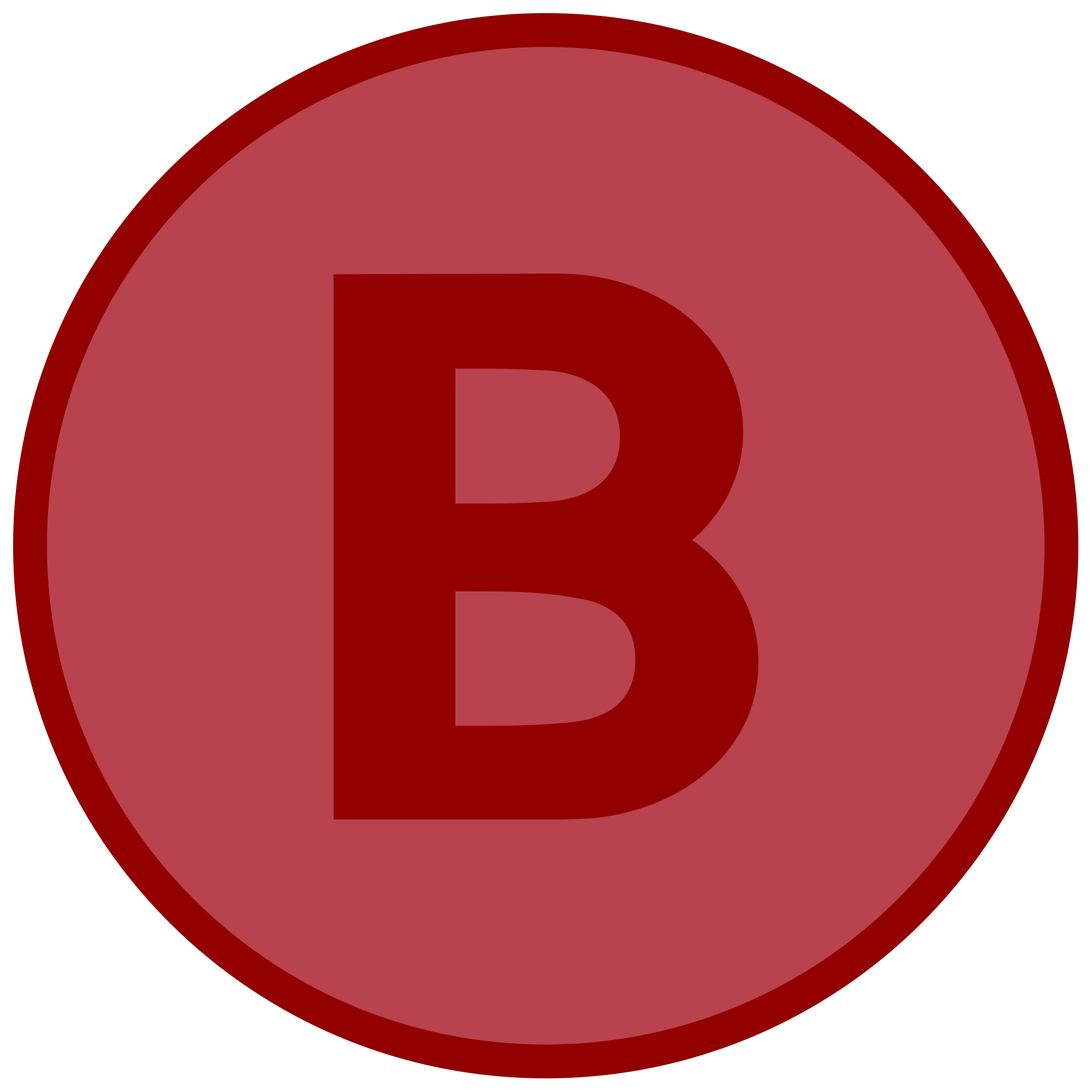
<style>
.page{position:relative;width:1092px;height:1092px;background:#b8424d}
.page>*{position:absolute;margin:0}
.t1{font:665px "RabbidHighwaySignII";color:#930000;scale:1.06 1}
</style>
<div class="page">
<p class="t1" style="left:334px;top:274px;width:424px;height:546px">B</p>
</div>
